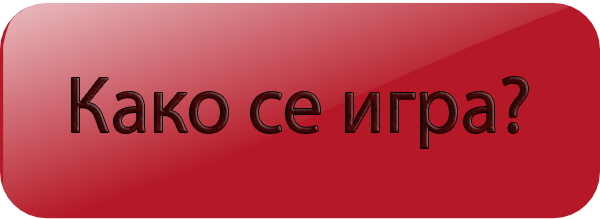
<style>
.page{position:relative;width:600px;height:219px;background:#b51927}
.page>*{position:absolute;margin:0}
.t1{font:80px "MyriadPro-Regular"}
</style>
<div class="page">
<p class="t1" style="left:72px;top:77px;width:456px;height:71px">Како се игра?</p>
</div>
